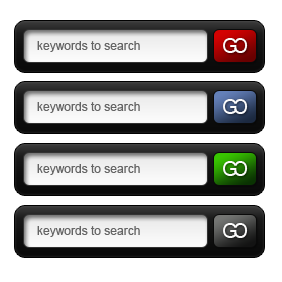
<style>
.page{position:relative;width:282px;height:282px;background:#ffffff}
.page>*{position:absolute;margin:0}
.t1{font:12px "ArialMT";color:#646464}
</style>
<div class="page">
<p class="t1" style="left:37px;top:41px;width:103px;height:11px">keywords to search</p>
<p class="t1" style="left:37px;top:102px;width:103px;height:11px">keywords to search</p>
<p class="t1" style="left:37px;top:164px;width:103px;height:11px">keywords to search</p>
<p class="t1" style="left:37px;top:226px;width:103px;height:11px">keywords to search</p>
</div>
